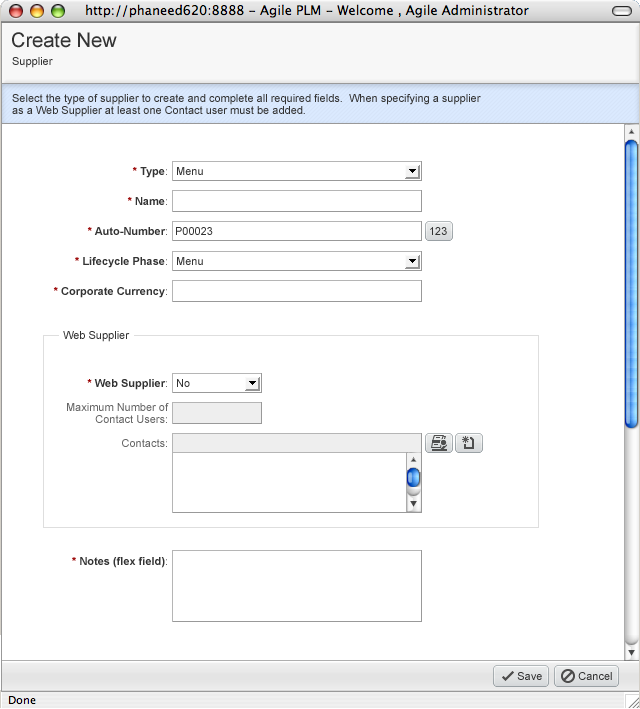
<style>
.page{position:relative;width:640px;height:709px;background:#ffffff}
.page>*{position:absolute;margin:0}
.t1{font:20px "ArialMT";color:#333333}
.t2{font:11px "ArialMT";color:#333333}
.t3{font:11px/12px "ArialMT";color:#333333}
.t4{font:11px "Arial-BoldMT";color:#333333}
.t5{font:11px "Arial-BoldMT";color:#990000}
.t6{font:11px "ArialMT";color:#666666}
.t7{font:11px/12px "ArialMT";color:#666666}
.t8{font:11px/30px "ArialMT";color:#666666}
</style>
<div class="page">
<p class="t1" style="left:12px;top:32px;width:105px;height:16px">Create New</p>
<p class="t2" style="left:12px;top:57px;width:41px;height:11px">Supplier</p>
<p class="t3" style="left:12px;top:94px;width:469px;height:23px">Select the type of supplier to create and complete all required fields.  When specifying a supplier<br>as a Web Supplier at least one Contact user must be added.</p>
<p class="t4" style="left:132px;top:167px;width:35px;height:11px"><span class="t5">*</span> Type<span class="t6">:</span></p>
<p class="t2" style="left:177px;top:167px;width:26px;height:8px">Menu</p>
<p class="t4" style="left:127px;top:197px;width:40px;height:8px"><span class="t5">*</span> Name<span class="t6">:</span></p>
<p class="t4" style="left:87px;top:227px;width:80px;height:8px"><span class="t5">*</span> Auto-Number<span class="t6">:</span></p>
<p class="t2" style="left:176px;top:227px;width:37px;height:8px">P00023</p>
<p class="t2" style="left:430px;top:227px;width:17px;height:8px">123</p>
<p class="t4" style="left:75px;top:257px;width:92px;height:11px"><span class="t5">*</span> Lifecycle Phase<span class="t6">:</span></p>
<p class="t2" style="left:177px;top:257px;width:26px;height:8px">Menu</p>
<p class="t4" style="left:53px;top:287px;width:114px;height:11px"><span class="t5">*</span> Corporate Currency<span class="t6">:</span></p>
<p class="t2" style="left:63px;top:331px;width:67px;height:11px">Web Supplier</p>
<p class="t4" style="left:87px;top:379px;width:80px;height:11px"><span class="t5">*</span> Web Supplier<span class="t6">:</span></p>
<p class="t2" style="left:177px;top:379px;width:13px;height:8px">No</p>
<p class="t7" style="left:67px;top:403px;width:102px;height:20px;text-align:right"><span class="t8">Maxi</span>mum Number of<br>Contact Users:</p>
<p class="t6" style="left:122px;top:439px;width:45px;height:8px">Contacts:</p>
<p class="t4" style="left:72px;top:557px;width:95px;height:11px"><span class="t5">*</span> Notes (flex field)<span class="t6">:</span></p>
<p class="t2" style="left:517px;top:672px;width:25px;height:8px">Save</p>
<p class="t2" style="left:578px;top:672px;width:34px;height:8px">Cancel</p>
</div>
